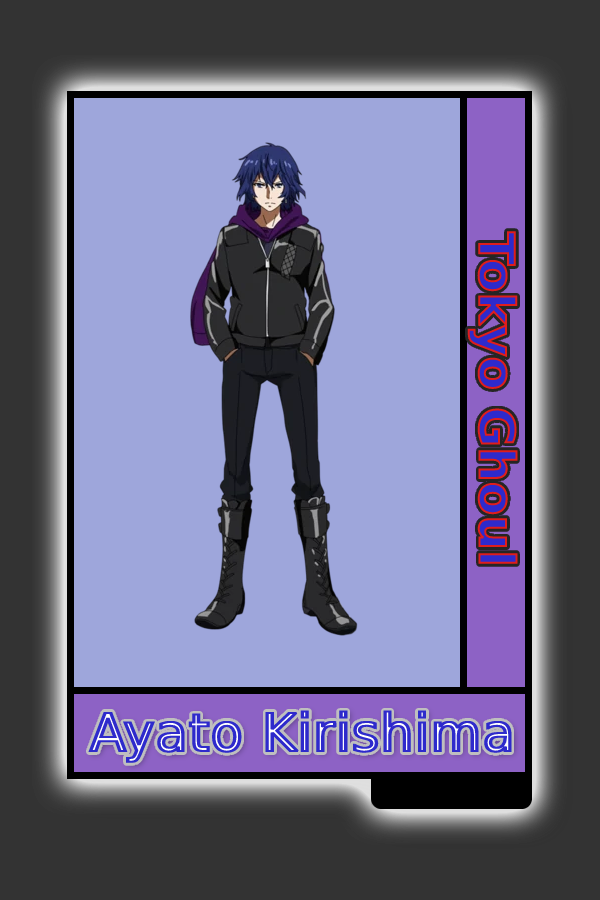
<style>
.page{position:relative;width:600px;height:900px;background:#9ea6db}
.page>*{position:absolute;margin:0}
.t1{font:48.8px "MADETOMMY-Bold"}
.t2{font:52px "CoolveticaRg-Regular";font-weight:bold}
</style>
<div class="page">
<p class="t1" style="left:467px;top:231px;width:51px;height:333px;rotate:90deg">Tokyo Ghoul</p>
<p class="t2" style="left:88px;top:710px;width:424px;height:53px">Ayato Kirishima</p>
</div>
